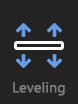
<style>
.page{position:relative;width:78px;height:104px;background:#232323}
.page>*{position:absolute;margin:0}
.t1{font:14px "SegoeUI";color:#7c7c7c;font-weight:bold}
</style>
<div class="page">
<p class="t1" style="left:13px;top:82px;width:52px;height:14px">Leveling</p>
</div>
